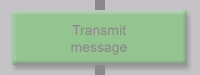
<style>
.page{position:relative;width:200px;height:75px;background:#94c591}
.page>*{position:absolute;margin:0}
.t1{font:14px "ArialMT";color:#8b898b}
</style>
<div class="page">
<p class="t1" style="left:71px;top:25px;width:56px;height:30px;text-align:center">Transmit<br>message</p>
</div>
